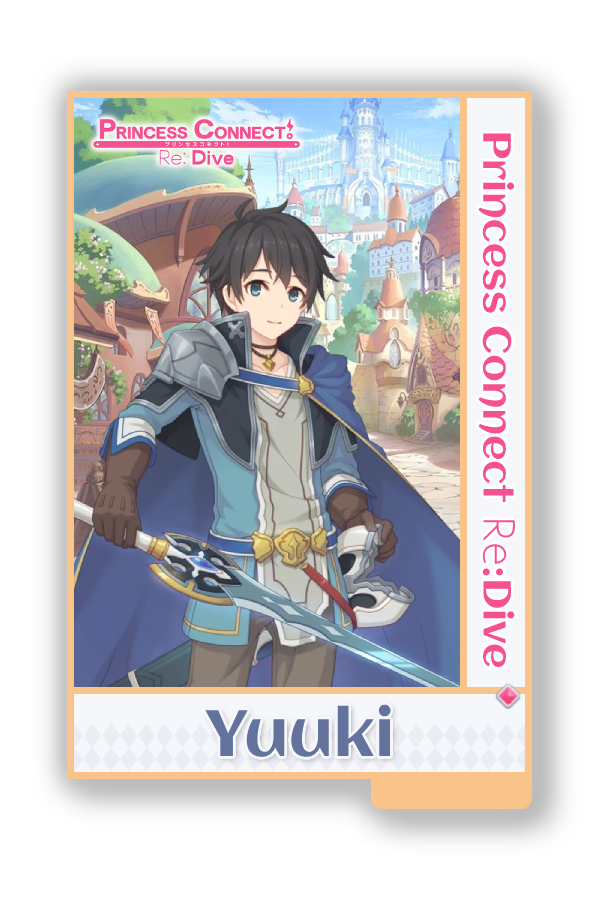
<style>
.page{position:relative;width:600px;height:900px;background:#ffffff}
.page>*{position:absolute;margin:0}
.t1{font:39px "Aclonica-Regular";color:#f55191}
.t2{font:39px "AaarghNormal";color:#f55191}
.t3{font:65px "Aclonica-Regular";color:#64739d}
</style>
<div class="page">
<p class="t1" style="left:478px;top:133px;width:38px;height:534px;rotate:90deg">Princess Connect <span class="t2">Re</span>:Dive</p>
<p class="t3" style="left:205px;top:704px;width:186px;height:53px">Yuuki</p>
</div>
